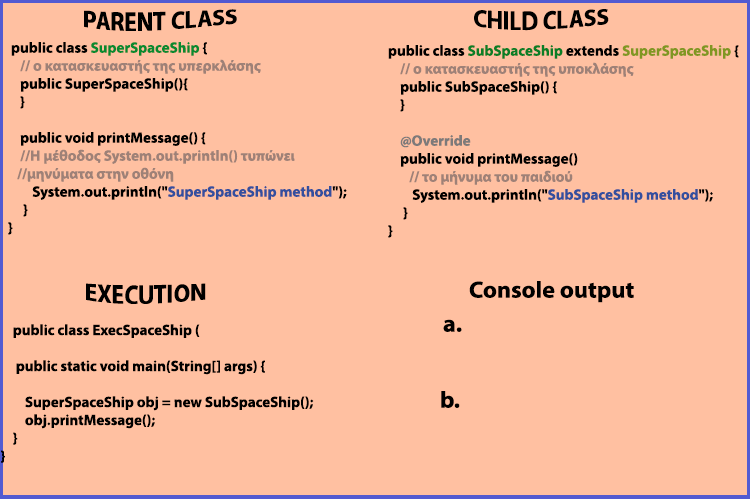
<style>
.page{position:relative;width:750px;height:499px;background:#ffc0a1}
.page>*{position:absolute;margin:0}
.t1{font:23.3px "MyriadPro-Bold";color:#000000}
.t2{font:15px "MyriadPro-Bold";color:#9e8177}
.t3{font:15px "MyriadPro-Bold";color:#000000}
.t4{font:15px "MyriadPro-Bold";color:#098a30}
.t5{font:15px "MyriadPro-Bold";color:#344f9e}
.t6{font:15px "MyriadPro-Bold";color:#0b7e26}
.t7{font:15px "MyriadPro-Bold";color:#809722}
.t8{font:15px "MyriadPro-Bold";color:#7d7a7a}
.t9{font:23.3px "MyriadPro-Bold";color:#000000;scale:1.04 1}
</style>
<div class="page">
<p class="t1" style="left:84px;top:9px;width:153px;height:22px">PARENT CLASS</p>
<p class="t1" style="left:474px;top:9px;width:135px;height:22px">CHILD CLASS</p>
<p class="t2" style="left:8px;top:42px;width:339px;height:193px"><span class="t3"> public class </span><span class="t4">SuperSpaceShip</span><span class="t3"> {<br>    </span>// ο κατασκευαστής της υπερκλάσης<br><span class="t3">    public SuperSpaceShip(){<br>    }<br><br>    public void printMessage() {<br>    </span>//Η μέθοδος System.out.println() τυπώνει      //μηνύματα στην οθόνη <span class="t3">  <br>        System.out.println("</span><span class="t5">SuperSpaceShip method</span><span class="t3">");     <br>     }<br>}</span></p>
<p class="t2" style="left:388px;top:45px;width:351px;height:193px"><span class="t3">public class</span><span class="t6"> SubSpaceShip</span><span class="t3"> extends </span><span class="t7">SuperSpaceShip</span><span class="t3"> {<br>    </span>// ο κατασκευαστής της υποκλάσης<br><span class="t3">    public SubSpaceShip() {<br>    }<br><br>  </span><span class="t8">  @Override<br></span><span class="t3">    public void printMessage()<br>       </span>// το μήνυμα του παιδιού<br><span class="t3">        System.out.println("</span><span class="t5">SubSpaceShip method</span><span class="t3">");    <br>     }<br>}</span></p>
<p class="t9" style="left:469px;top:281px;width:165px;height:22px">Console output</p>
<p class="t1" style="left:86px;top:283px;width:120px;height:21px">EXECUTION</p>
<p class="t3" style="left:1px;top:324px;width:313px;height:139px">public class ExecSpaceShip (<br><br>     public static void main(String[] args) {<br><br>        SuperSpaceShip obj = new SubSpaceShip();<br>        obj.printMessage();  <br>    }<br>}</p>
<p class="t9" style="left:443px;top:319px;width:19px;height:13px">a.</p>
<p class="t9" style="left:441px;top:391px;width:19px;height:17px">b.</p>
</div>
